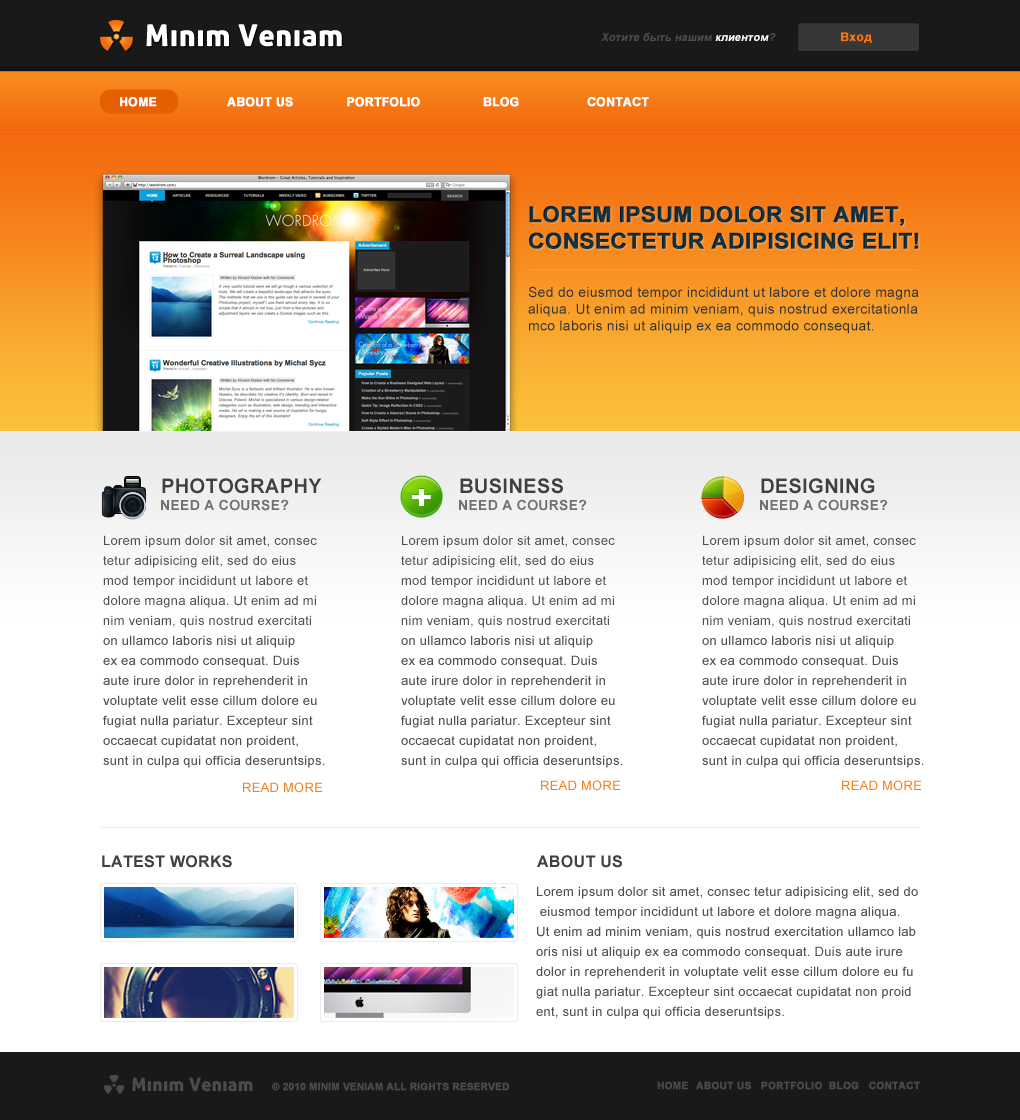
<style>
.page{position:relative;width:1020px;height:1120px;background:#ffffff}
.page>*{position:absolute;margin:0}
.t1{font:30px "AllerDisplay";letter-spacing:0.02em;color:#ffffff}
.t2{font:11px "Arial-BoldMT";letter-spacing:0.01em;color:#4c4c4c;font-style:italic}
.t3{font:11px "Arial-BoldMT";letter-spacing:0.01em;color:#ffffff;font-style:italic}
.t4{font:12px "Arial-BoldMT";letter-spacing:0.01em;color:#f57514;font-weight:bold}
.t5{font:12px "Arial-BoldMT";letter-spacing:0.01em;color:#ffffff;font-weight:bold}
.t6{font:22px "Arial-BoldMT";letter-spacing:0.01em;color:#113848;font-weight:bold}
.t7{font:14px "ArialMT";letter-spacing:0.02em;color:#353535}
.t8{font:20px "Arial-BoldMT";letter-spacing:0.02em;color:#404040}
.t9{font:14px "Arial-BoldMT";letter-spacing:0.02em;color:#707070}
.t10{font:13px/20px "ArialMT";letter-spacing:0.02em;color:#505050}
.t11{font:13px "ArialMT";letter-spacing:0.02em;color:#f67f19}
.t12{font:16px "Arial-BoldMT";letter-spacing:0.02em;color:#404040}
.t13{font:18.4px "AllerDisplay";letter-spacing:0.02em;color:#4b4b4b}
.t14{font:10px "Arial-BoldMT";color:#4b4b4b;font-weight:bold}
.t15{font:10px "Arial-BoldMT";letter-spacing:0.01em;color:#4b4b4b;font-weight:bold}
</style>
<div class="page">
<p class="t1" style="left:146px;top:24px;width:196px;height:23px">Minim Veniam</p>
<p class="t2" style="left:601px;top:32px;width:175px;height:9px">Хотите быть нашим <span class="t3">клиентом</span>?</p>
<p class="t4" style="left:841px;top:32px;width:31px;height:11px">Вход</p>
<p class="t5" style="left:120px;top:97px;width:529px;height:10px">HOME  ABOUT US     PORTFOLIO   BLOG  CONTACT</p>
<p class="t6" style="left:529px;top:206px;width:390px;height:43px">LOREM IPSUM DOLOR SIT AMET, <br>CONSECTETUR ADIPISICING ELIT!</p>
<p class="t7" style="left:528px;top:286px;width:391px;height:48px">Sed do eiusmod tempor incididunt ut labore et dolore magna <br>aliqua. Ut enim ad minim veniam, quis nostrud exercitationla<br>mco laboris nisi ut aliquip ex ea commodo consequat.</p>
<p class="t8" style="left:162px;top:478px;width:160px;height:16px">PHOTOGRAPHY</p>
<p class="t8" style="left:460px;top:478px;width:103px;height:16px">BUSINESS</p>
<p class="t8" style="left:761px;top:478px;width:114px;height:16px">DESIGNING</p>
<p class="t9" style="left:161px;top:499px;width:128px;height:12px">NEED A COURSE?</p>
<p class="t9" style="left:459px;top:499px;width:128px;height:12px">NEED A COURSE?</p>
<p class="t9" style="left:760px;top:499px;width:128px;height:12px">NEED A COURSE?</p>
<p class="t10" style="left:103px;top:535px;width:222px;height:233px">Lorem ipsum dolor sit amet, consec<br>tetur adipisicing elit, sed do eius<br>mod tempor incididunt ut labore et <br>dolore magna aliqua. Ut enim ad mi<br>nim veniam, quis nostrud exercitati<br>on ullamco laboris nisi ut aliquip <br>ex ea commodo consequat. Duis <br>aute irure dolor in reprehenderit in <br>voluptate velit esse cillum dolore eu <br>fugiat nulla pariatur. Excepteur sint <br>occaecat cupidatat non proident, <br>sunt in culpa qui officia deseruntsips.</p>
<p class="t10" style="left:401px;top:535px;width:222px;height:233px">Lorem ipsum dolor sit amet, consec<br>tetur adipisicing elit, sed do eius<br>mod tempor incididunt ut labore et <br>dolore magna aliqua. Ut enim ad mi<br>nim veniam, quis nostrud exercitati<br>on ullamco laboris nisi ut aliquip <br>ex ea commodo consequat. Duis <br>aute irure dolor in reprehenderit in <br>voluptate velit esse cillum dolore eu <br>fugiat nulla pariatur. Excepteur sint <br>occaecat cupidatat non proident, <br>sunt in culpa qui officia deseruntsips.</p>
<p class="t10" style="left:702px;top:535px;width:222px;height:233px">Lorem ipsum dolor sit amet, consec<br>tetur adipisicing elit, sed do eius<br>mod tempor incididunt ut labore et <br>dolore magna aliqua. Ut enim ad mi<br>nim veniam, quis nostrud exercitati<br>on ullamco laboris nisi ut aliquip <br>ex ea commodo consequat. Duis <br>aute irure dolor in reprehenderit in <br>voluptate velit esse cillum dolore eu <br>fugiat nulla pariatur. Excepteur sint <br>occaecat cupidatat non proident, <br>sunt in culpa qui officia deseruntsips.</p>
<p class="t11" style="left:243px;top:782px;width:80px;height:11px">READ MORE</p>
<p class="t11" style="left:541px;top:780px;width:80px;height:11px">READ MORE</p>
<p class="t11" style="left:842px;top:780px;width:80px;height:11px">READ MORE</p>
<p class="t12" style="left:102px;top:855px;width:130px;height:13px">LATEST WORKS</p>
<p class="t12" style="left:537px;top:855px;width:85px;height:13px">ABOUT US</p>
<p class="t10" style="left:536px;top:886px;width:382px;height:133px">Lorem ipsum dolor sit amet, consec tetur adipisicing elit, sed do<br> eiusmod tempor incididunt ut labore et dolore magna aliqua. <br>Ut enim ad minim veniam, quis nostrud exercitation ullamco lab<br>oris nisi ut aliquip ex ea commodo consequat. Duis aute irure <br>dolor in reprehenderit in voluptate velit esse cillum dolore eu fu<br>giat nulla pariatur. Excepteur sint occaecat cupidatat non proid<br>ent, sunt in culpa qui officia deseruntsips.</p>
<p class="t13" style="left:132px;top:1077px;width:121px;height:15px">Minim Veniam</p>
<p class="t14" style="left:272px;top:1082px;width:237px;height:9px">© 2010 MINIM VENIAM ALL RIGHTS RESERVED</p>
<p class="t15" style="left:657px;top:1081px;width:263px;height:9px">HOME  ABOUT US   PORTFOLIO  BLOG   CONTACT</p>
</div>
